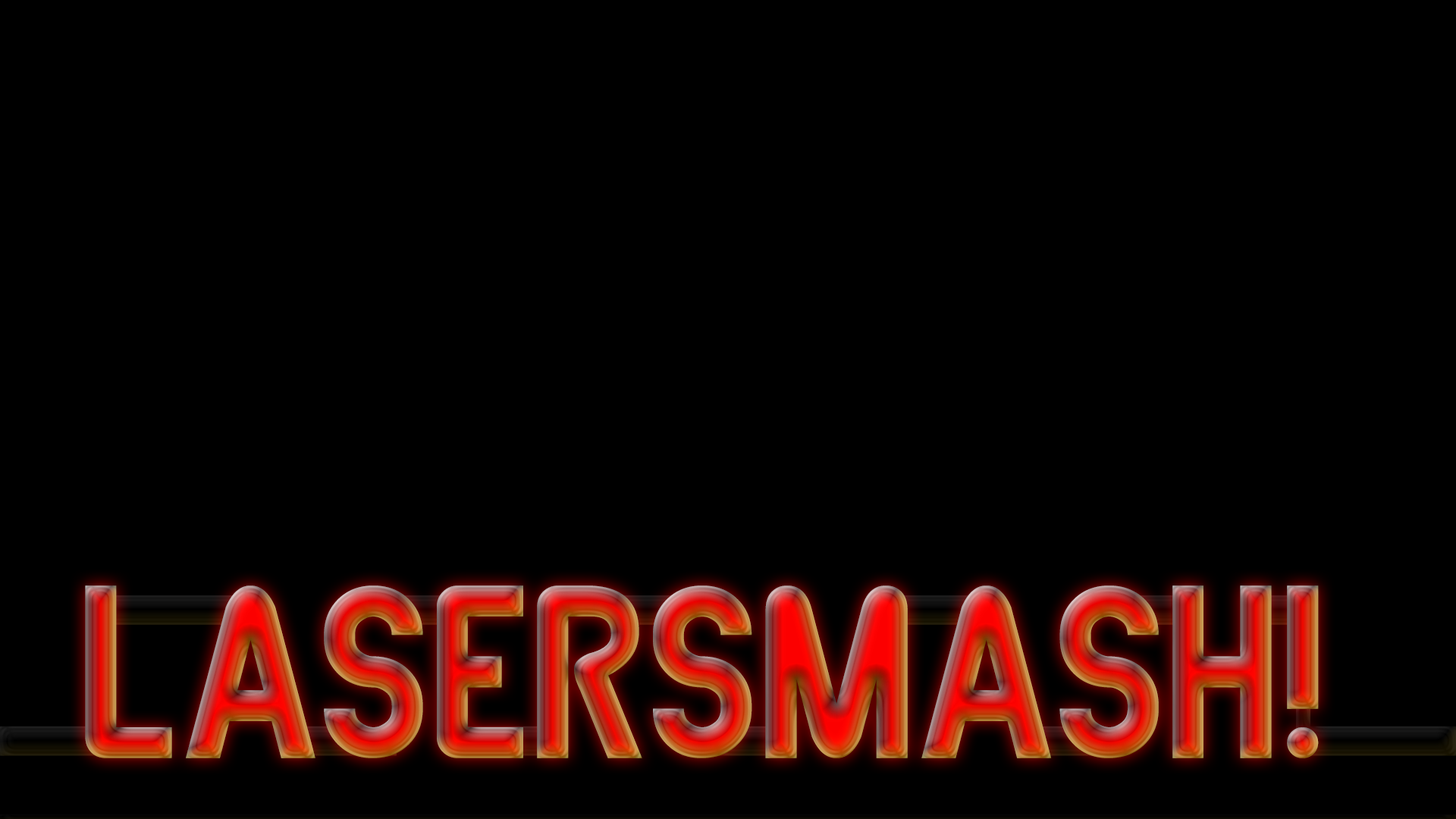
<style>
.page{position:relative;width:1456px;height:819px;background:#000000}
.page>*{position:absolute;margin:0}
.t1{font:252.3px "Joystick";text-transform:uppercase}
</style>
<div class="page">
<p class="t1" style="left:85px;top:585px;width:1234px;height:173px">LasersmasH!</p>
</div>
